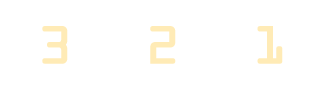
<style>
.page{position:relative;width:325px;height:88px;background:#ffffff}
.page>*{position:absolute;margin:0}
.t1{font:48px "OCRAStd";color:#ffebb6;font-weight:bold}
</style>
<div class="page">
<p class="t1" style="left:42px;top:26px;width:241px;height:38px">3  2  1</p>
</div>
